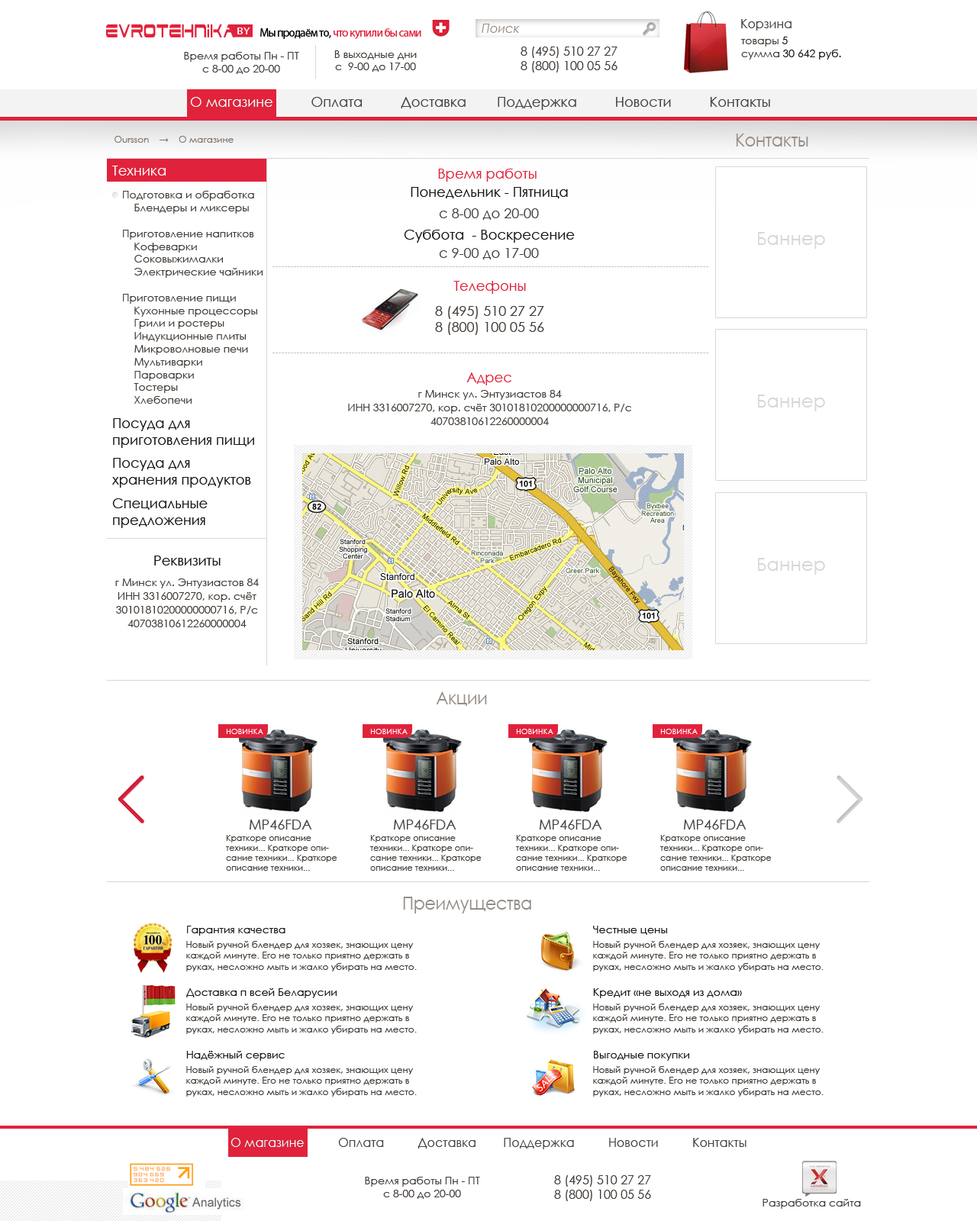
<style>
.page{position:relative;width:977px;height:1221px;background:#ffffff}
.page>*{position:absolute;margin:0}
.t1{font:22.3px "Dodger";letter-spacing:0.016em;color:#e1223c;scale:0.53 1}
.t2{font:9.4px "MyriadPro-Cond";letter-spacing:0.016em;color:#ffffff;text-transform:uppercase;scale:1.73 1}
.t3{font:11.4px "MyriadPro-Regular";letter-spacing:-0.044em;color:#e1223b}
.t4{font:11.4px "MyriadPro-Regular";letter-spacing:-0.044em;color:#000000}
.t5{font:12.2px "CenturyGothic-Italic";color:#968c85}
.t6{font:12.2px "CenturyGothic";color:#434342}
.t7{font:10.7px "CenturyGothic";color:#151515}
.t8{font:10.7px "CenturyGothic";color:#423c37}
.t9{font:12.2px "CenturyGothic";color:#423c37}
.t10{font:13.7px "CenturyGothic";color:#434342}
.t11{font:13.7px "CenturyGothic";color:#ffffff}
.t12{font:9.2px "CenturyGothic";color:#7f746c}
.t13{font:18.3px "CenturyGothic";color:#968c85;scale:0.9 1}
.t14{font:13.7px/18.3px "CenturyGothic";color:#151515}
.t15{font:13.7px/18.3px "CenturyGothic";color:#e1223b}
.t16{font:13.7px "CenturyGothic";color:#151515}
.t17{font:18.3px "CenturyGothic";color:#d7d7d7}
.t18{font:13.7px "CenturyGothic";color:#e1223b}
.t19{font:13.7px "CenturyGothic";color:#423c37}
.t20{font:10.7px/13.7px "CenturyGothic";color:#423c37}
.t21{font:7.6px "CenturyGothic";color:#ffffff;text-transform:uppercase}
.t22{font:8.4px "CenturyGothic";color:#423c37}
.t23{font:9.2px "CenturyGothic";color:#423c37}
.t24{font:12.2px "CenturyGothic";color:#ffffff}
</style>
<div class="page">
<p class="t1" style="left:106px;top:24px;width:129px;height:13px">Evrotehnika</p>
<p class="t2" style="left:237px;top:27px;width:13px;height:7px">by</p>
<p class="t3" style="left:260px;top:28px;width:161px;height:11px"><span class="t4">Мы продаём то, </span>что купили бы сами</p>
<p class="t5" style="left:481px;top:24px;width:39px;height:9px">Поиск</p>
<p class="t6" style="left:741px;top:19px;width:50px;height:12px">Корзина</p>
<p class="t7" style="left:741px;top:37px;width:100px;height:23px"><span class="t8">товары </span>5<br><span class="t8">сумма </span>30 642 руб.</p>
<p class="t8" style="left:184px;top:52px;width:115px;height:22px;text-align:center">Время работы Пн - ПТ<br>с 8-00 до 20-00</p>
<p class="t8" style="left:334px;top:50px;width:83px;height:22px;text-align:center">В выходные дни<br>с  9-00 до 17-00</p>
<p class="t9" style="left:520px;top:47px;width:97px;height:25px;text-align:center">8 (495) 510 27 27     <br>8 (800) 100 05 56</p>
<p class="t10" style="left:190px;top:97px;width:580px;height:13px">О магазине          Оплата          Доставка        Поддержка          Новости          Контакты</p>
<p class="t11" style="left:190px;top:97px;width:82px;height:10px">О магазине</p>
<p class="t12" style="left:114px;top:136px;width:119px;height:7px">Oursson    →    О магазине</p>
<p class="t13" style="left:736px;top:134px;width:72px;height:13px">Контакты</p>
<p class="t11" style="left:112px;top:166px;width:54px;height:10px">Техника</p>
<p class="t14" style="left:411px;top:169px;width:157px;height:29px;text-align:center"><span class="t15">Время работы <br></span>Понедельник - Пятница</p>
<p class="t8" style="left:123px;top:191px;width:139px;height:213px">Подготовка и обработка<br>    Блендеры и миксеры<br><br>Приготовление напитков<br>    Кофеварки<br>    Соковыжималки<br>    Электрические чайники<br><br>Приготовление пищи<br>    Кухонные процессоры<br>    Грили и ростеры<br>    Индукционные плиты<br>    Микроволновые печи<br>    Мультиварки<br>    Пароварки<br>    Тостеры<br>    Хлебопечи</p>
<p class="t10" style="left:439px;top:208px;width:100px;height:12px">с 8-00 до 20-00</p>
<p class="t16" style="left:404px;top:230px;width:171px;height:13px">Суббота  - Воскресение</p>
<p class="t17" style="left:758px;top:232px;width:67px;height:17px">Баннер</p>
<p class="t10" style="left:439px;top:248px;width:100px;height:11px">с 9-00 до 17-00</p>
<p class="t18" style="left:453px;top:281px;width:73px;height:13px">Телефоны</p>
<p class="t19" style="left:435px;top:306px;width:109px;height:29px;text-align:center">8 (495) 510 27 27     <br>8 (800) 100 05 56</p>
<p class="t18" style="left:466px;top:372px;width:45px;height:13px">Адрес</p>
<p class="t20" style="left:348px;top:390px;width:283px;height:35px;text-align:center">г Минск ул. Энтузиастов 84<br>ИНН 3316007270, кор. счёт 30101810200000000716, Р/с 40703810612260000004</p>
<p class="t17" style="left:758px;top:394px;width:67px;height:17px">Баннер</p>
<p class="t16" style="left:113px;top:418px;width:141px;height:30px">Посуда для <br>приготовления пищи</p>
<p class="t16" style="left:112px;top:458px;width:139px;height:30px">Посуда для <br>хранения продуктов</p>
<p class="t16" style="left:112px;top:498px;width:96px;height:30px">Специальные <br>предложения</p>
<p class="t16" style="left:154px;top:555px;width:67px;height:10px">Реквизиты</p>
<p class="t17" style="left:758px;top:558px;width:67px;height:17px">Баннер</p>
<p class="t20" style="left:115px;top:578px;width:144px;height:49px;text-align:center">г Минск ул. Энтузиастов 84<br>ИНН 3316007270, кор. счёт 30101810200000000716, Р/с 40703810612260000004</p>
<p class="t13" style="left:436px;top:691px;width:51px;height:15px">Акции</p>
<p class="t21" style="left:226px;top:729px;width:37px;height:5px">Новинка</p>
<p class="t21" style="left:370px;top:729px;width:37px;height:5px">Новинка</p>
<p class="t21" style="left:516px;top:729px;width:37px;height:5px">Новинка</p>
<p class="t21" style="left:660px;top:729px;width:37px;height:5px">Новинка</p>
<p class="t10" style="left:249px;top:820px;width:63px;height:9px">MP46FDA</p>
<p class="t10" style="left:393px;top:820px;width:63px;height:9px">MP46FDA</p>
<p class="t10" style="left:539px;top:820px;width:63px;height:9px">MP46FDA</p>
<p class="t10" style="left:683px;top:820px;width:63px;height:9px">MP46FDA</p>
<p class="t22" style="left:226px;top:835px;width:111px;height:36px">Краткоре описание техники... Краткоре описание техники... Краткоре описание техники...</p>
<p class="t22" style="left:370px;top:835px;width:111px;height:36px">Краткоре описание техники... Краткоре описание техники... Краткоре описание техники...</p>
<p class="t22" style="left:516px;top:835px;width:111px;height:36px">Краткоре описание техники... Краткоре описание техники... Краткоре описание техники...</p>
<p class="t22" style="left:660px;top:835px;width:111px;height:36px">Краткоре описание техники... Краткоре описание техники... Краткоре описание техники...</p>
<p class="t13" style="left:403px;top:897px;width:128px;height:16px">Преимущества</p>
<p class="t7" style="left:187px;top:926px;width:98px;height:9px">Гарантия качества</p>
<p class="t7" style="left:593px;top:926px;width:74px;height:9px">Честные цены</p>
<p class="t23" style="left:186px;top:941px;width:231px;height:30px">Новый ручной блендер для хозяек, знающих цену каждой минуте. Его не только приятно держать в руках, несложно мыть и жалко убирать на место.</p>
<p class="t23" style="left:593px;top:941px;width:230px;height:30px">Новый ручной блендер для хозяек, знающих цену каждой минуте. Его не только приятно держать в руках, несложно мыть и жалко убирать на место.</p>
<p class="t7" style="left:186px;top:988px;width:151px;height:10px">Доставка п всей Беларусии</p>
<p class="t7" style="left:593px;top:988px;width:149px;height:10px">Кредит «не выходя из дома»</p>
<p class="t23" style="left:186px;top:1003px;width:231px;height:31px">Новый ручной блендер для хозяек, знающих цену каждой минуте. Его не только приятно держать в руках, несложно мыть и жалко убирать на место.</p>
<p class="t23" style="left:593px;top:1003px;width:230px;height:31px">Новый ручной блендер для хозяек, знающих цену каждой минуте. Его не только приятно держать в руках, несложно мыть и жалко убирать на место.</p>
<p class="t7" style="left:186px;top:1051px;width:99px;height:10px">Надёжный сервис</p>
<p class="t7" style="left:594px;top:1051px;width:95px;height:10px">Выгодные покупки</p>
<p class="t23" style="left:186px;top:1066px;width:231px;height:31px">Новый ручной блендер для хозяек, знающих цену каждой минуте. Его не только приятно держать в руках, несложно мыть и жалко убирать на место.</p>
<p class="t23" style="left:593px;top:1066px;width:230px;height:31px">Новый ручной блендер для хозяек, знающих цену каждой минуте. Его не только приятно держать в руках, несложно мыть и жалко убирать на место.</p>
<p class="t6" style="left:230px;top:1138px;width:516px;height:11px">О магазине          Оплата          Доставка        Поддержка          Новости          Контакты</p>
<p class="t24" style="left:230px;top:1138px;width:74px;height:9px">О магазине</p>
<p class="t8" style="left:365px;top:1177px;width:115px;height:22px;text-align:center">Время работы Пн - ПТ<br>с 8-00 до 20-00</p>
<p class="t9" style="left:554px;top:1175px;width:97px;height:26px;text-align:center">8 (495) 510 27 27     <br>8 (800) 100 05 56</p>
<p class="t8" style="left:762px;top:1199px;width:99px;height:10px">Разработка сайта</p>
</div>
